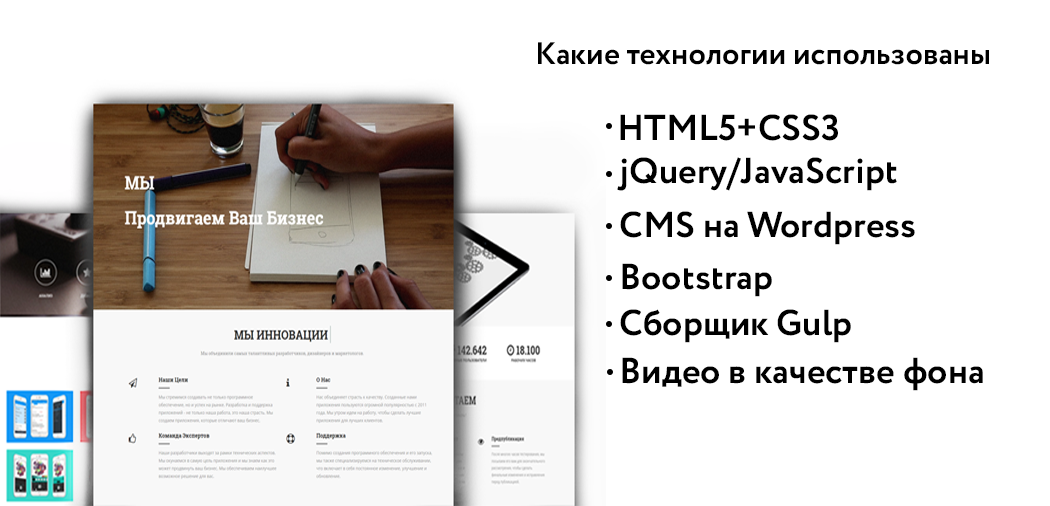
<style>
.page{position:relative;width:1050px;height:506px;background:#ffffff}
.page>*{position:absolute;margin:0}
.t1{font:31px "Circe-Bold";color:#000000}
.t2{font:36px "Circe-Bold";color:#000000}
</style>
<div class="page">
<p class="t1" style="left:538px;top:42px;width:451px;height:23px">Какие технологии использованы</p>
<p class="t2" style="left:620px;top:114px;width:218px;height:27px">HTML5+CSS3</p>
<p class="t2" style="left:617px;top:157px;width:280px;height:34px">jQuery/JavaScript</p>
<p class="t2" style="left:620px;top:211px;width:295px;height:34px">CMS на Wordpress</p>
<p class="t2" style="left:622px;top:263px;width:150px;height:34px">Bootstrap</p>
<p class="t2" style="left:620px;top:309px;width:231px;height:34px">Сборщик Gulp</p>
<p class="t2" style="left:622px;top:357px;width:361px;height:34px">Видео в качестве фона</p>
</div>
